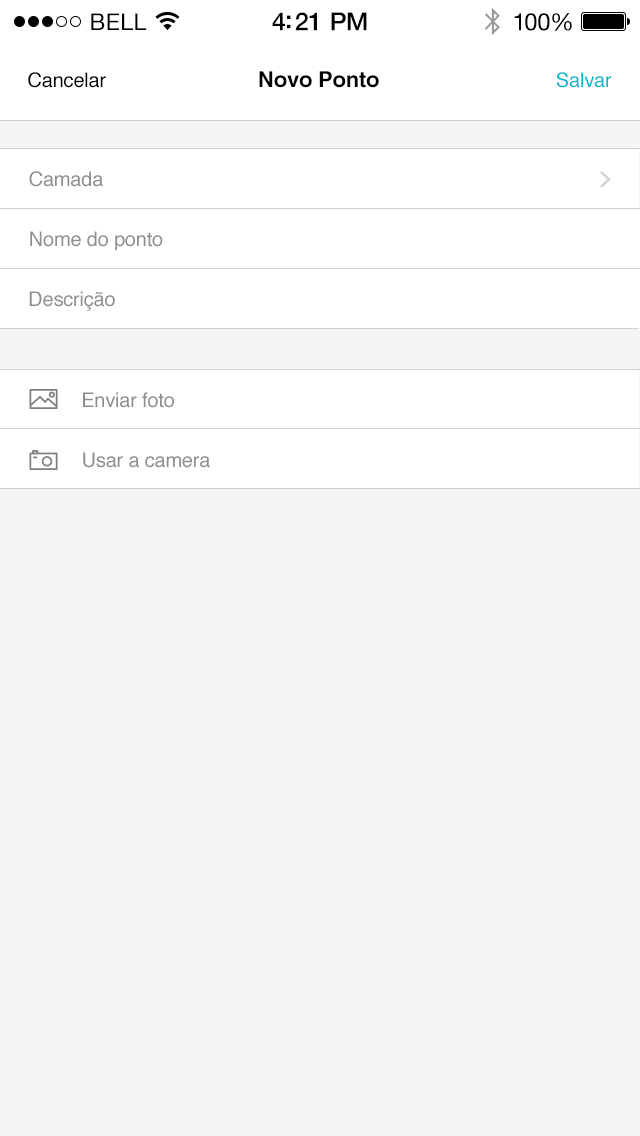
<style>
.page{position:relative;width:640px;height:1136px;background:#f5f5f5}
.page>*{position:absolute;margin:0}
.t1{font:23px "HelveticaNeue";letter-spacing:0.02em;color:#000000}
.t2{font:25px "HelveticaNeue-Medium";letter-spacing:-0.02em;color:#000000}
.t3{font:24px "HelveticaNeue";letter-spacing:-0.02em;color:#010101}
.t4{font:20px "Helvetica";letter-spacing:-0.01em;color:#000000}
.t5{font:22px "Helvetica-Bold";letter-spacing:-0.01em;color:#000000}
.t6{font:20px "Helvetica";letter-spacing:-0.01em;color:#00b7cd}
.t7{font:20px "Helvetica";letter-spacing:-0.01em;color:#8e8e8e}
</style>
<div class="page">
<p class="t1" style="left:91px;top:13px;width:56px;height:17px">BELL</p>
<p class="t2" style="left:272px;top:12px;width:95px;height:19px">4:21 PM</p>
<p class="t3" style="left:514px;top:13px;width:58px;height:18px">100%</p>
<p class="t4" style="left:28px;top:72px;width:78px;height:16px">Cancelar</p>
<p class="t5" style="left:259px;top:71px;width:120px;height:17px">Novo Ponto</p>
<p class="t6" style="left:556px;top:72px;width:56px;height:16px">Salvar</p>
<p class="t7" style="left:29px;top:171px;width:74px;height:16px">Camada</p>
<p class="t7" style="left:30px;top:231px;width:133px;height:20px">Nome do ponto</p>
<p class="t7" style="left:29px;top:291px;width:86px;height:20px">Descrição</p>
<p class="t7" style="left:83px;top:392px;width:91px;height:16px">Enviar foto</p>
<p class="t7" style="left:83px;top:452px;width:127px;height:16px">Usar a camera</p>
</div>
